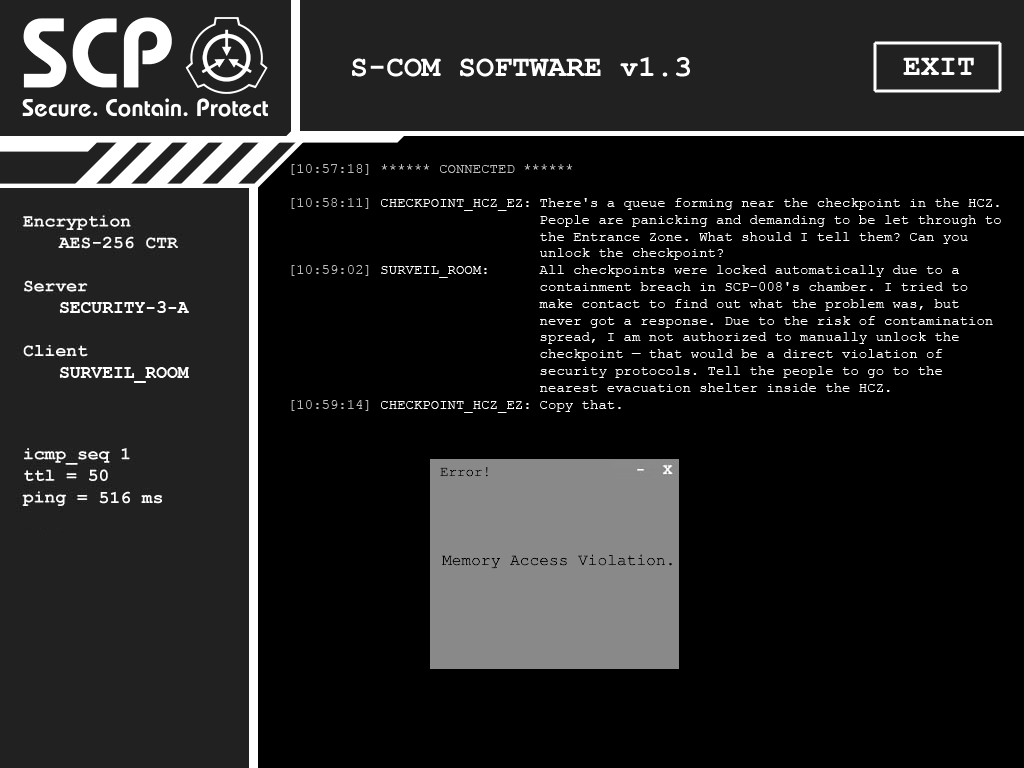
<style>
.page{position:relative;width:1024px;height:768px;background:#000000}
.page>*{position:absolute;margin:0}
.t1{font:14px "CourierNewPSMT";color:#bbbbbb;text-transform:uppercase}
.t2{font:14px "CourierNewPSMT";color:#ffffff;text-transform:uppercase}
.t3{font:14px "CourierNewPSMT";color:#bcbcbc;text-transform:uppercase}
.t4{font:14px "CourierNewPSMT";color:#ffffff}
.t5{font:18px "CourierNewPS-BoldMT";color:#ffffff;text-transform:uppercase}
</style>
<div class="page">
<p class="t1" style="left:291px;top:164px;width:282px;height:11px">[10:57:18] ****** CONNECTED ******</p>
<p class="t2" style="left:291px;top:198px;width:238px;height:13px"><span class="t3">[10:58:11]</span> checkpoint_hcz_ez:</p>
<p class="t4" style="left:539px;top:198px;width:462px;height:214px">There's a queue forming near the checkpoint in the HCZ. People are panicking and demanding to be let through to the Entrance Zone. What should I tell them? Can you unlock the checkpoint?<br>All checkpoints were locked automatically due to a containment breach in SCP-008's chamber. I tried to make contact to find out what the problem was, but never got a response. Due to the risk of contamination spread, I am not authorized to manually unlock the checkpoint — that would be a direct violation of security protocols. Tell the people to go to the nearest evacuation shelter inside the HCZ.<br>Copy that.</p>
<p class="t2" style="left:291px;top:265px;width:196px;height:13px"><span class="t1">[10:59:02]</span> surveil_room:</p>
<p class="t5" style="left:59px;top:301px;width:130px;height:12px">security-3-A</p>
<p class="t5" style="left:59px;top:367px;width:130px;height:16px">surveil_room</p>
<p class="t2" style="left:291px;top:400px;width:238px;height:13px"><span class="t3">[10:59:14]</span> checkpoint_hcz_ez:</p>
</div>
